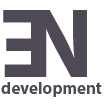
<style>
.page{position:relative;width:104px;height:104px;background:#ffffff}
.page>*{position:absolute;margin:0}
.t1{font:100px "MyriadPro-Bold";color:#4e4954}
.t2{font:17px "MyriadPro-Bold";color:#4e4954}
</style>
<div class="page">
<p class="t1" style="left:3px;top:10px;width:44px;height:67px;rotate:180deg">E</p>
<p class="t1" style="left:32px;top:10px;width:55px;height:67px">N</p>
<p class="t2" style="left:1px;top:82px;width:101px;height:15px">development</p>
</div>
